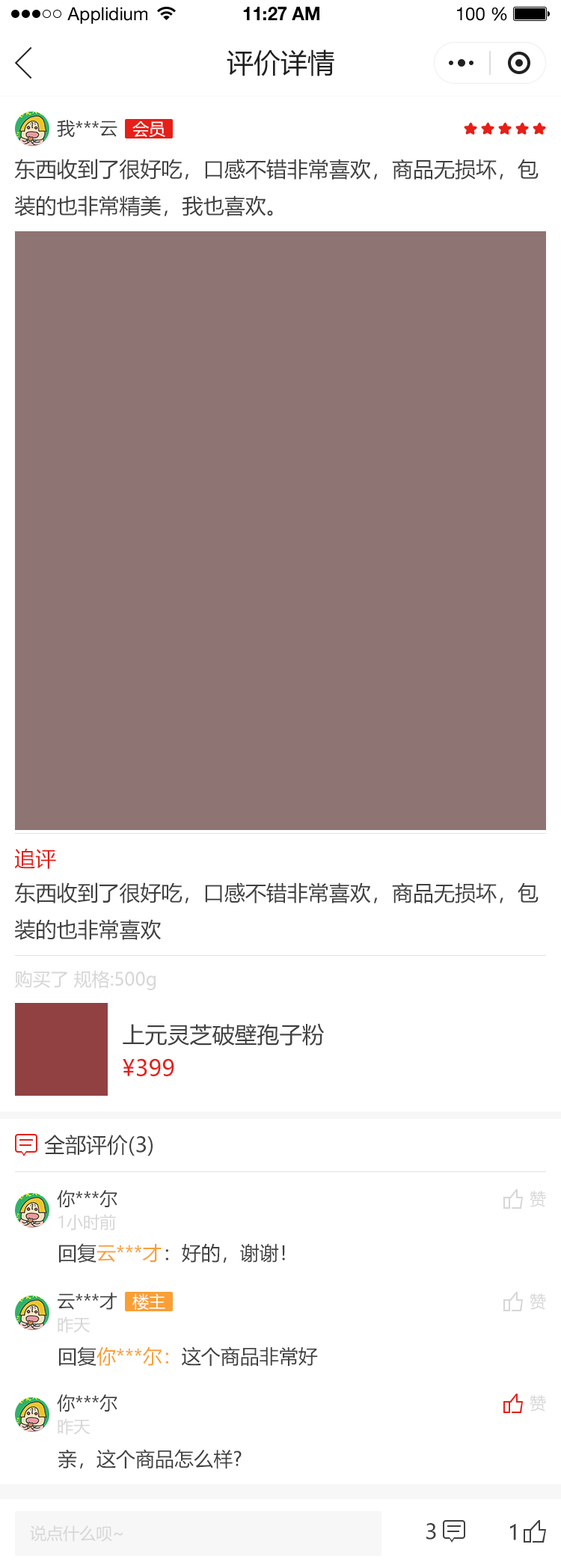
<style>
.page{position:relative;width:561px;height:1568px;background:#ffffff}
.page>*{position:absolute;margin:0}
.t1{font:18px "HelveticaNeueLTStd-Roman";color:#000000}
.t2{font:18px "HelveticaNeueLTStd-Bd";color:#000000}
.t3{font:26.9px "MicrosoftYaHei";color:#202020;text-transform:uppercase}
.t4{font:18px "MicrosoftYaHei";letter-spacing:0.001em;color:#404040;text-transform:uppercase}
.t5{font:16.5px "MicrosoftYaHei";letter-spacing:0.001em;color:#ffffff;text-transform:uppercase}
.t6{font:21px "MicrosoftYaHei";letter-spacing:0.001em;color:#404040;text-transform:uppercase}
.t7{font:21px "MicrosoftYaHei";letter-spacing:0.001em;color:#e61f18;text-transform:uppercase}
.t8{font:18px "MicrosoftYaHei";letter-spacing:0.001em;color:#d6d6d6}
.t9{font:22.5px "MicrosoftYaHei";letter-spacing:0.001em;color:#404040}
.t10{font:22.5px "MicrosoftYaHei";letter-spacing:0.001em;color:#e61f18}
.t11{font:21px "MicrosoftYaHei";letter-spacing:0.001em;color:#404040}
.t12{font:16.5px "MicrosoftYaHei";letter-spacing:0.001em;color:#d6d6d6;text-transform:uppercase}
.t13{font:19.5px "MicrosoftYaHei";letter-spacing:0.001em;color:#404040;text-transform:uppercase}
.t14{font:19.5px "MicrosoftYaHei";letter-spacing:0.001em;color:#f99f36;text-transform:uppercase}
</style>
<div class="page">
<p class="t1" style="left:67px;top:7px;width:80px;height:17px">Applidium</p>
<p class="t2" style="left:243px;top:7px;width:77px;height:13px">11:27 AM</p>
<p class="t1" style="left:457px;top:7px;width:50px;height:14px">100 %</p>
<p class="t3" style="left:227px;top:49px;width:108px;height:27px">评价详情</p>
<p class="t4" style="left:57px;top:120px;width:61px;height:17px">我***云</p>
<p class="t5" style="left:132px;top:121px;width:33px;height:17px">会员</p>
<p class="t6" style="left:14px;top:159px;width:525px;height:57px">东西收到了很好吃，口感不错非常喜欢，商品无损坏，包<br>装的也非常精美，我也喜欢。</p>
<p class="t7" style="left:14px;top:848px;width:42px;height:21px">追评</p>
<p class="t6" style="left:14px;top:882px;width:525px;height:58px">东西收到了很好吃，口感不错非常喜欢，商品无损坏，包<br>装的也非常喜欢</p>
<p class="t8" style="left:14px;top:970px;width:142px;height:20px">购买了 规格:500g</p>
<p class="t9" style="left:123px;top:1023px;width:202px;height:23px">上元灵芝破壁孢子粉</p>
<p class="t10" style="left:123px;top:1058px;width:51px;height:18px">¥399</p>
<p class="t11" style="left:44px;top:1135px;width:109px;height:21px">全部评价(3)</p>
<p class="t4" style="left:57px;top:1190px;width:61px;height:18px">你***尔</p>
<p class="t12" style="left:530px;top:1191px;width:16px;height:16px">赞</p>
<p class="t12" style="left:58px;top:1214px;width:58px;height:16px">1小时前</p>
<p class="t13" style="left:59px;top:1243px;width:226px;height:20px">回复<span class="t14">云***才</span>：好的，谢谢！</p>
<p class="t4" style="left:58px;top:1293px;width:60px;height:17px">云***才</p>
<p class="t5" style="left:132px;top:1293px;width:33px;height:17px">楼主</p>
<p class="t12" style="left:530px;top:1293px;width:16px;height:17px">赞</p>
<p class="t12" style="left:58px;top:1317px;width:32px;height:16px">昨天</p>
<p class="t13" style="left:59px;top:1346px;width:259px;height:20px">回复<span class="t14">你***尔：</span>这个商品非常好</p>
<p class="t4" style="left:57px;top:1394px;width:61px;height:18px">你***尔</p>
<p class="t12" style="left:530px;top:1395px;width:16px;height:17px">赞</p>
<p class="t12" style="left:58px;top:1418px;width:32px;height:17px">昨天</p>
<p class="t13" style="left:58px;top:1449px;width:184px;height:20px">亲，这个商品怎么样?</p>
<p class="t12" style="left:30px;top:1525px;width:93px;height:17px">说点什么呗~</p>
<p class="t11" style="left:427px;top:1523px;width:9px;height:17px">3</p>
<p class="t11" style="left:510px;top:1524px;width:6px;height:16px">1</p>
</div>
